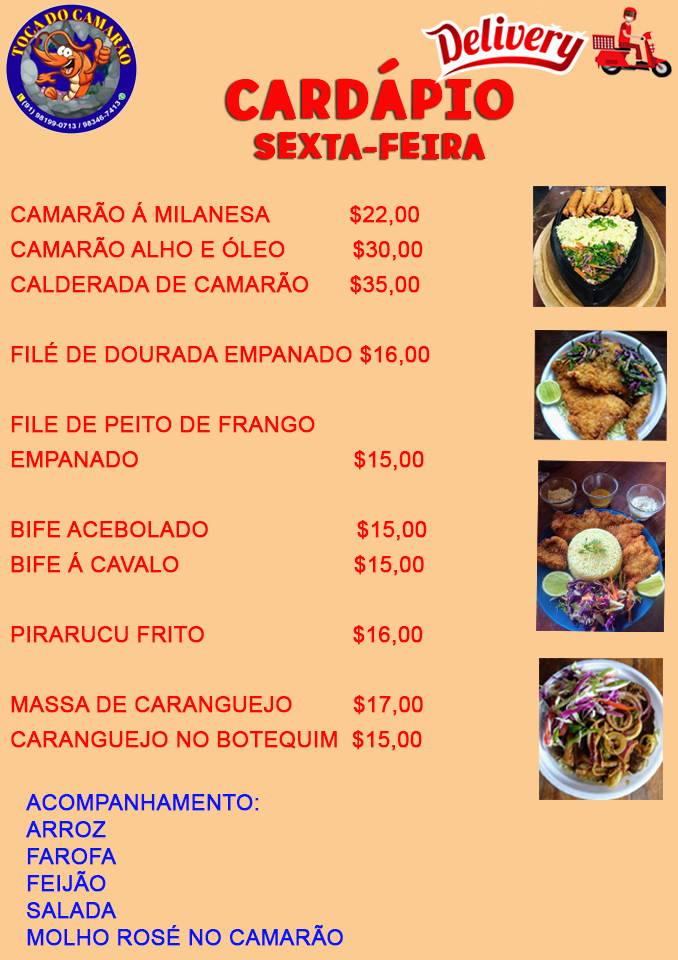
<style>
.page{position:relative;width:678px;height:960px;background:#fccb91}
.page>*{position:absolute;margin:0}
.t1{font:85px "meatloafsketched";letter-spacing:0.04em;color:#fc0505;font-weight:bold}
.t2{font:54px "meatloafsketched";letter-spacing:0.04em;color:#fc0505;font-weight:bold}
.t3{font:22px/35px "ArialMT";color:#fc0505;font-weight:bold}
.t4{font:22px/27px "ArialMT";color:#0516fc;font-weight:bold}
</style>
<div class="page">
<p class="t1" style="left:226px;top:58px;width:288px;height:62px">CARDÁPIO</p>
<p class="t2" style="left:255px;top:132px;width:231px;height:27px">SEXTA-FEIRA</p>
<p class="t3" style="left:11px;top:202px;width:419px;height:549px">CAMARÃO Á MILANESA            $22,00<br>CAMARÃO ALHO E ÓLEO          $30,00<br>CALDERADA DE CAMARÃO      $35,00<br><br>FILÉ DE DOURADA EMPANADO $16,00<br><br>FILE DE PEITO DE FRANGO <br>EMPANADO                                $15,00<br><br>BIFE ACEBOLADO                      $15,00<br>BIFE Á CAVALO                          $15,00<br><br>PIRARUCU FRITO                      $16,00<br><br>MASSA DE CARANGUEJO         $17,00<br>CARANGUEJO NO BOTEQUIM  $15,00</p>
<p class="t4" style="left:26px;top:794px;width:317px;height:152px">ACOMPANHAMENTO:<br>ARROZ<br>FAROFA<br>FEIJÃO<br>SALADA<br>MOLHO ROSÉ NO CAMARÃO</p>
</div>
